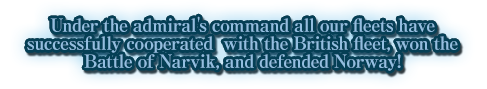
<style>
.page{position:relative;width:487px;height:89px}
.page>*{position:absolute;margin:0}
.t1{font:18px/18px "RyuminPro-ExBold";letter-spacing:-0.04em;color:#93bee0}
</style>
<div class="page">
<p class="t1" style="left:27px;top:16px;width:431px;height:55px;text-align:center">Under the admiral's command all our fleets have<br>successfully cooperated  with the British fleet, won the<br>Battle of Narvik, and defended Norway!</p>
</div>
